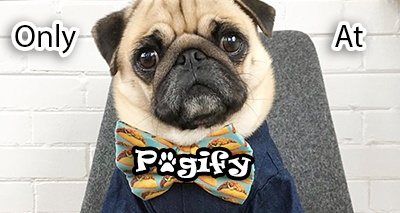
<style>
.page{position:relative;width:400px;height:213px}
.page>*{position:absolute;margin:0}
.t1{font:32px "MyriadPro-Regular";color:#000000}
.t2{font:25.8px/180.4px "Ravie";color:#ffffff}
.t3{font:25.8px "Ravie";color:#ffffff}
</style>
<div class="page">
<p class="t1" style="left:15px;top:24px;width:61px;height:30px">Only</p>
<p class="t1" style="left:335px;top:25px;width:28px;height:22px">At</p>
<p class="t2" style="left:135px;top:149px;width:22px;height:23px;text-align:center">P<br>P</p>
<p class="t3" style="left:177px;top:150px;width:74px;height:28px">gify</p>
</div>
